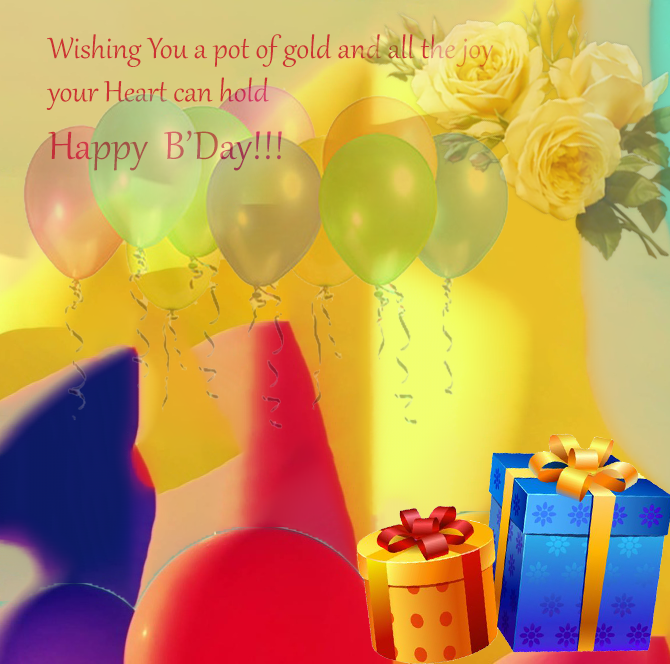
<style>
.page{position:relative;width:670px;height:664px}
.page>*{position:absolute;margin:0}
.t1{font:36px "Gabriola"}
.t2{font:48px "Gabriola"}
</style>
<div class="page">
<p class="t1" style="left:46px;top:34px;width:448px;height:137px">Wishing You a pot of gold and all the joy <br>your Heart can hold <br><span class="t2">Happy  B’Day!!!</span></p>
</div>
